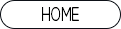
<style>
.page{position:relative;width:121px;height:29px;background:#ffffff}
.page>*{position:absolute;margin:0}
.t1{font:19.2px "NexaLight";color:#000000;text-transform:uppercase;scale:0.67 1}
</style>
<div class="page">
<p class="t1" style="left:42px;top:7px;width:37px;height:14px">Home</p>
</div>
